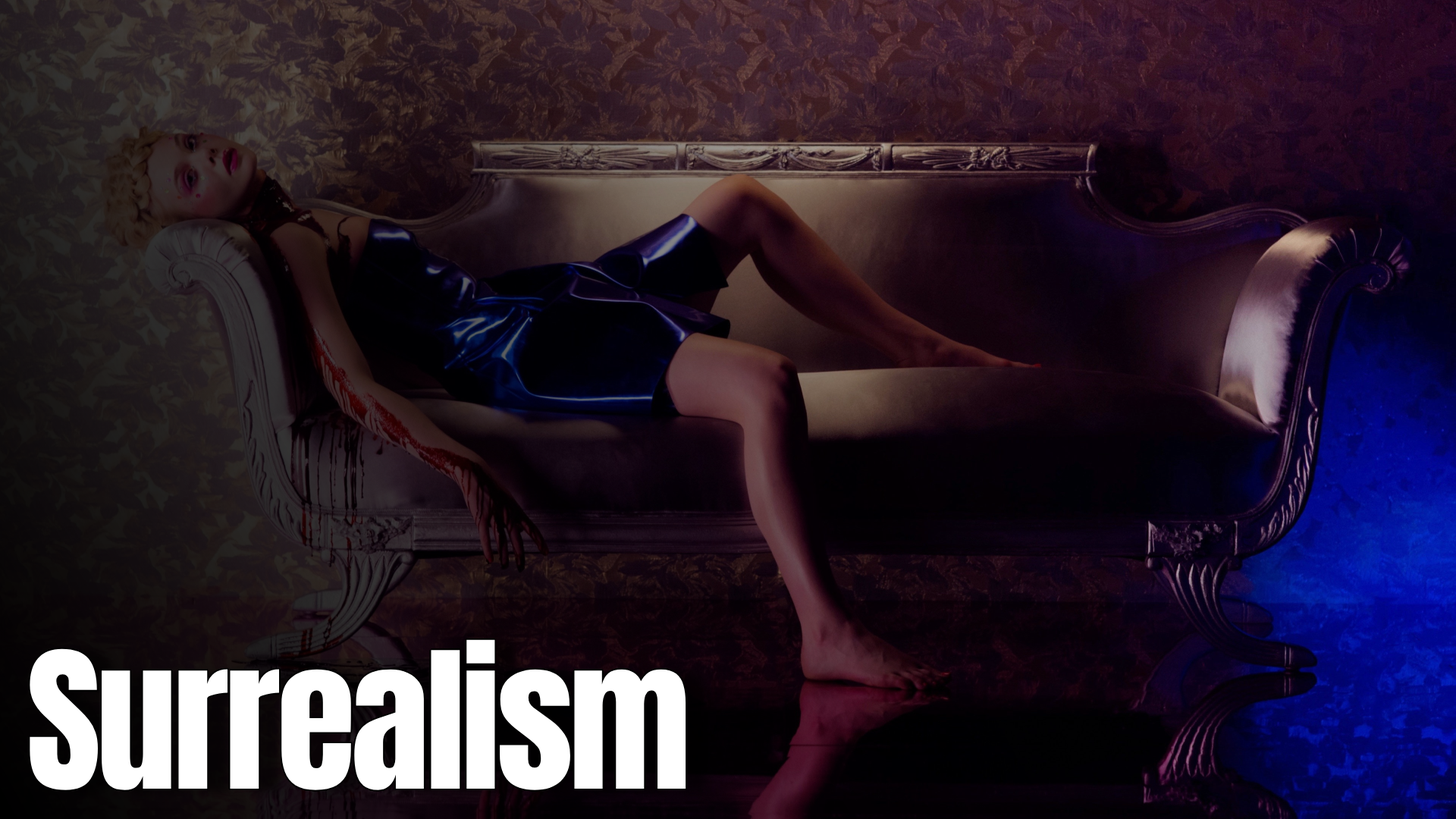
<style>
.page{position:relative;width:1456px;height:819px}
.page>*{position:absolute;margin:0}
.t1{font:161.2px "Anton-Regular";letter-spacing:-0.025em;color:#ffffff}
</style>
<div class="page">
<p class="t1" style="left:30px;top:639px;width:656px;height:151px">Surrealism</p>
</div>
